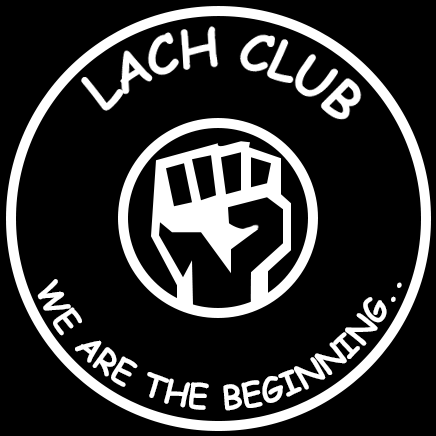
<style>
.page{position:relative;width:436px;height:436px;background:#000000}
.page>*{position:absolute;margin:0}
.t1{font:32.6px "ComicSansMS-Bold";letter-spacing:0.02em;color:#ffffff}
</style>
<div class="page">
<p class="t1" style="left:37px;top:279px;width:365px;height:132px;text-align:center">WE ARE THE BEGINNING..</p>
</div>
